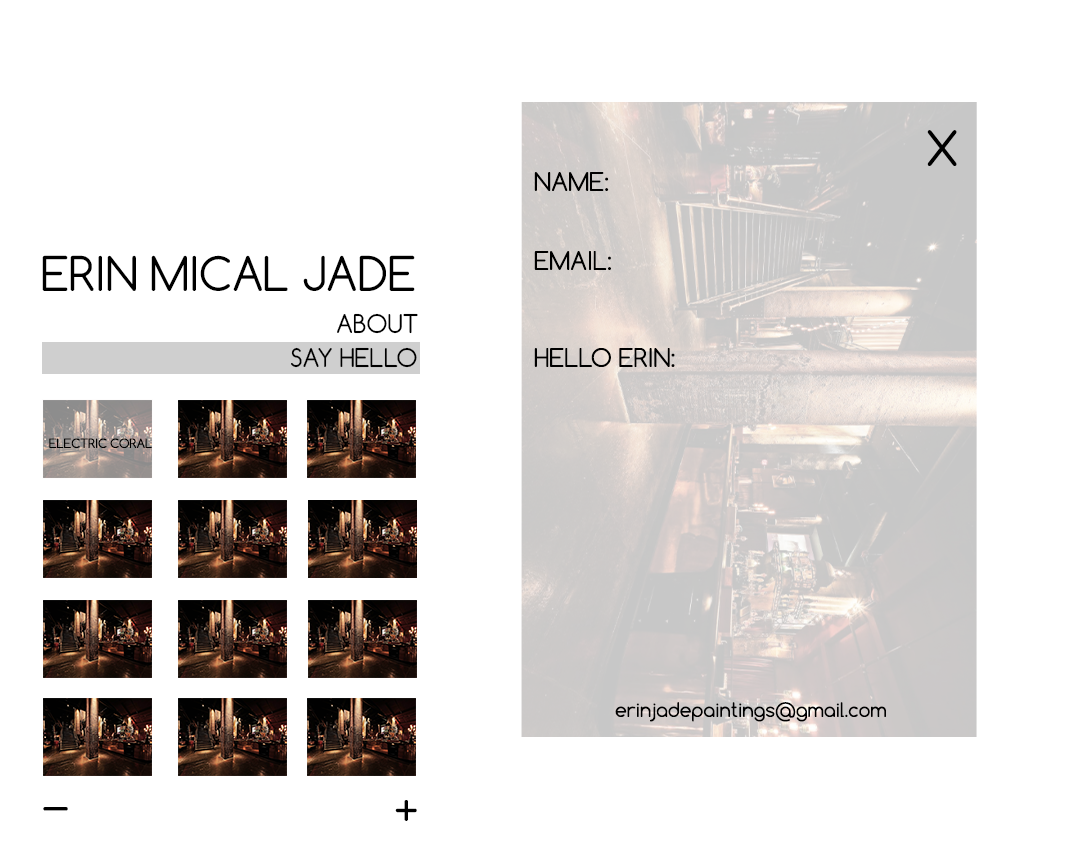
<style>
.page{position:relative;width:1080px;height:864px;background:#ffffff}
.page>*{position:absolute;margin:0}
.t1{font:45.9px "Comfortaa-Regular";color:#000000}
.t2{font:24.3px "Comfortaa-Regular";color:#000000}
.t3{font:45px "Comfortaa-Regular";color:#000000}
.t4{font:12.2px "Comfortaa-Regular";color:#000000}
.t5{font:18.9px "Comfortaa-Regular";color:#000000}
</style>
<div class="page">
<p class="t1" style="left:927px;top:130px;width:30px;height:36px">X</p>
<p class="t2" style="left:534px;top:172px;width:75px;height:19px">NAME:</p>
<p class="t3" style="left:42px;top:255px;width:373px;height:36px">ERIN MICAL JADE</p>
<p class="t2" style="left:534px;top:251px;width:77px;height:19px">EMAIL:</p>
<p class="t2" style="left:337px;top:313px;width:81px;height:21px">ABOUT</p>
<p class="t2" style="left:291px;top:347px;width:126px;height:21px">SAY HELLO</p>
<p class="t2" style="left:534px;top:348px;width:141px;height:19px">HELLO ERIN:</p>
<p class="t4" style="left:49px;top:438px;width:103px;height:10px">ELECTRIC CORAL</p>
<p class="t5" style="left:615px;top:702px;width:271px;height:20px">erinjadepaintings@gmail.com</p>
<p class="t3" style="left:43px;top:807px;width:25px;height:4px">_</p>
<p class="t3" style="left:395px;top:800px;width:22px;height:21px">+</p>
</div>
